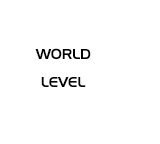
<style>
.page{position:relative;width:160px;height:144px;background:#ffffff}
.page>*{position:absolute;margin:0}
.t1{font:14px/14px "HandelGothicBT-Regular";color:#000000}
</style>
<div class="page">
<p class="t1" style="left:35px;top:48px;width:56px;height:39px;text-align:center">WORLD<br><br>LEVEL</p>
</div>
